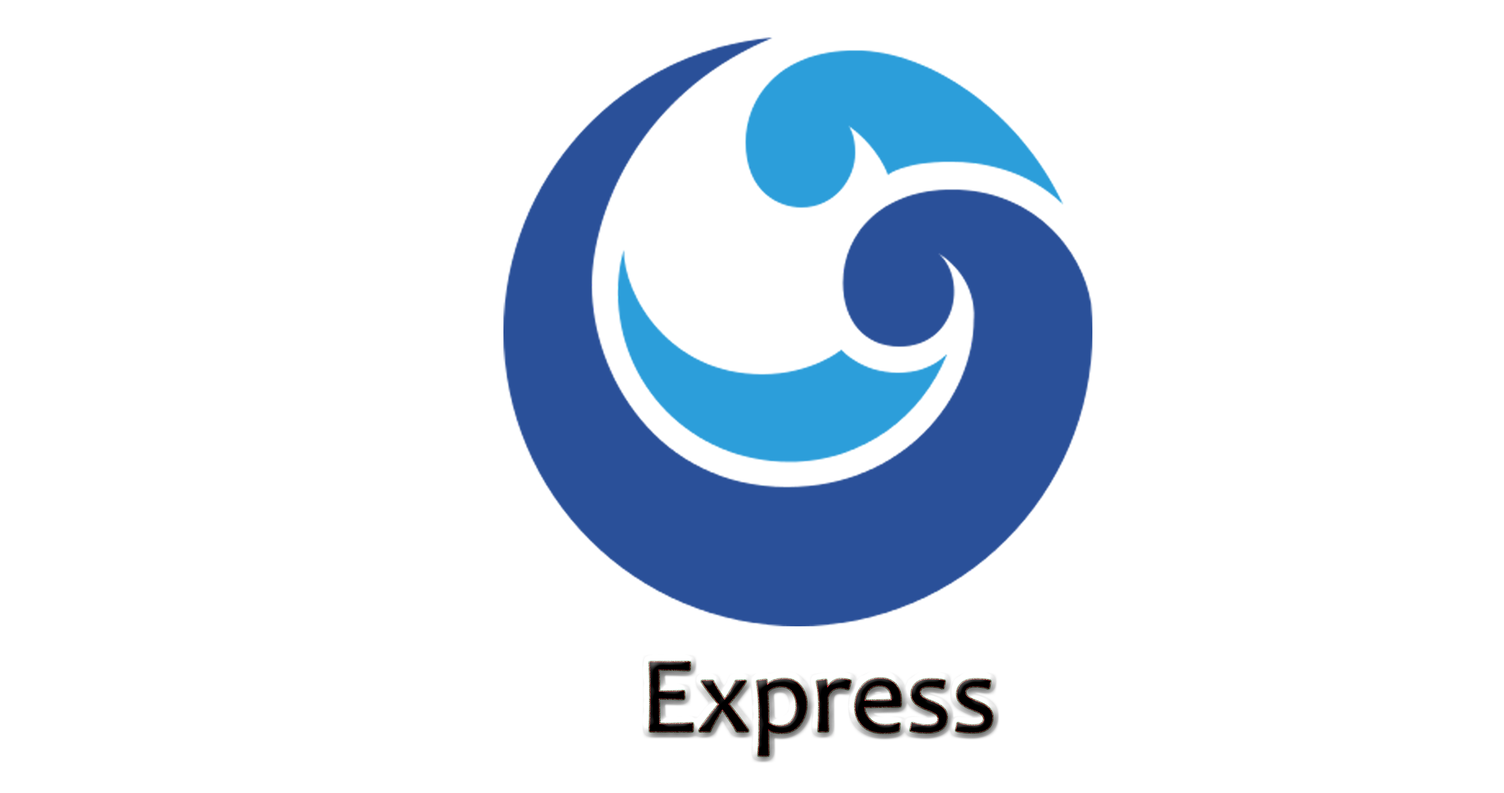
<style>
.page{position:relative;width:1504px;height:793px;background:#ffffff}
.page>*{position:absolute;margin:0}
.t1{font:108.7px "Candara";color:#000000}
</style>
<div class="page">
<p class="t1" style="left:649px;top:662px;width:343px;height:94px">Express</p>
</div>
